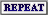
<style>
.page{position:relative;width:48px;height:15px}
.page>*{position:absolute;margin:0}
.t1{font:10px "TimesNewRomanPS-BoldMT"}
</style>
<div class="page">
<p class="t1" style="left:4px;top:4px;width:40px;height:7px">REPEAT</p>
</div>
